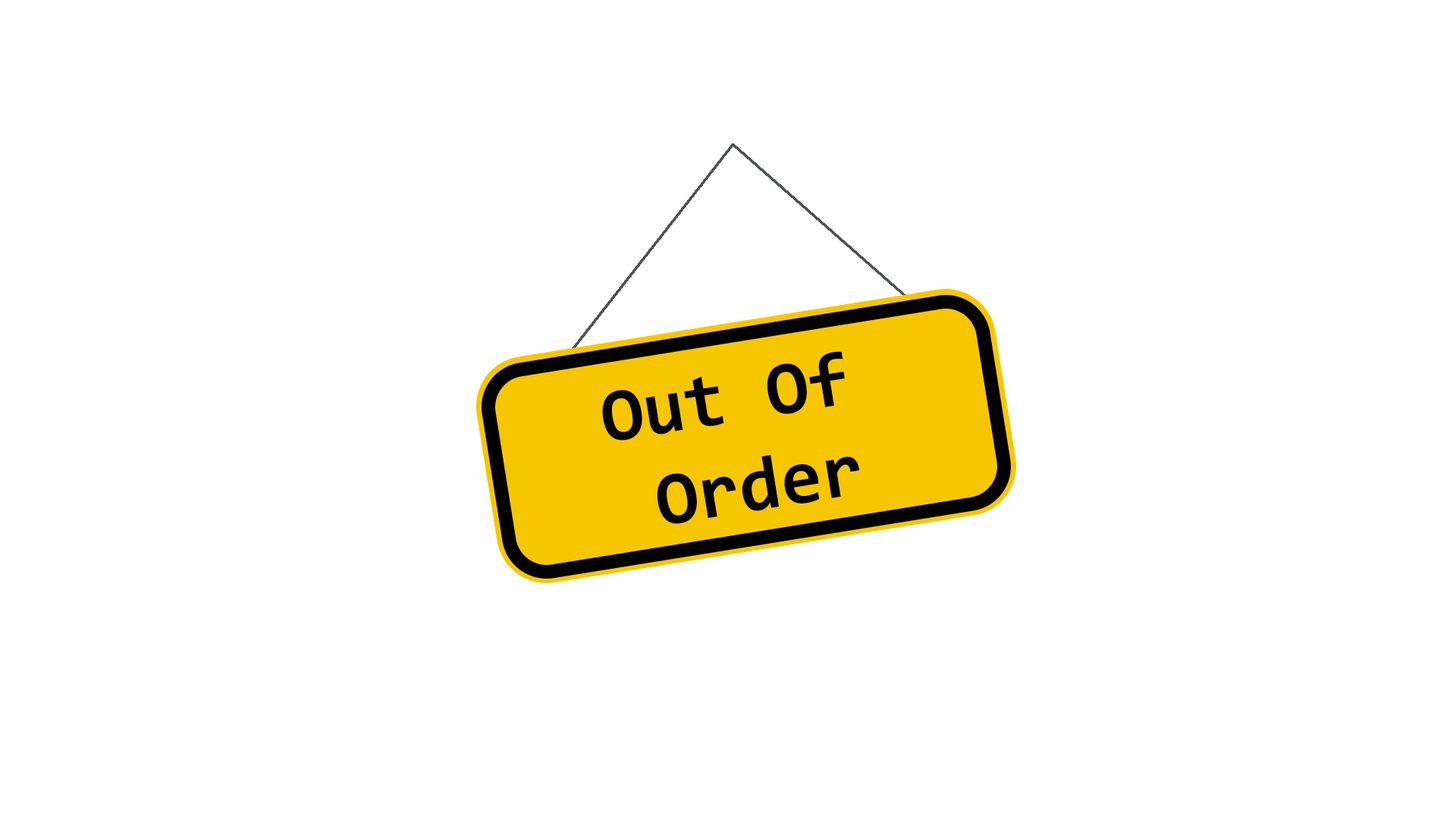
<style>
.page{position:relative;width:1456px;height:819px;background:#ffffff}
.page>*{position:absolute;margin:0}
.t1{font:75.8px "Consolas-Bold";color:#000000}
</style>
<div class="page">
<p class="t1" style="left:602px;top:351px;width:258px;height:173px;rotate:-9deg">Out Of  Order</p>
</div>
